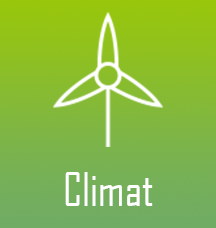
<style>
.page{position:relative;width:216px;height:228px}
.page>*{position:absolute;margin:0}
.t1{font:45.3px "AgencyFB-Reg";color:#ffffff}
</style>
<div class="page">
<p class="t1" style="left:65px;top:172px;width:88px;height:34px">Climat</p>
</div>
